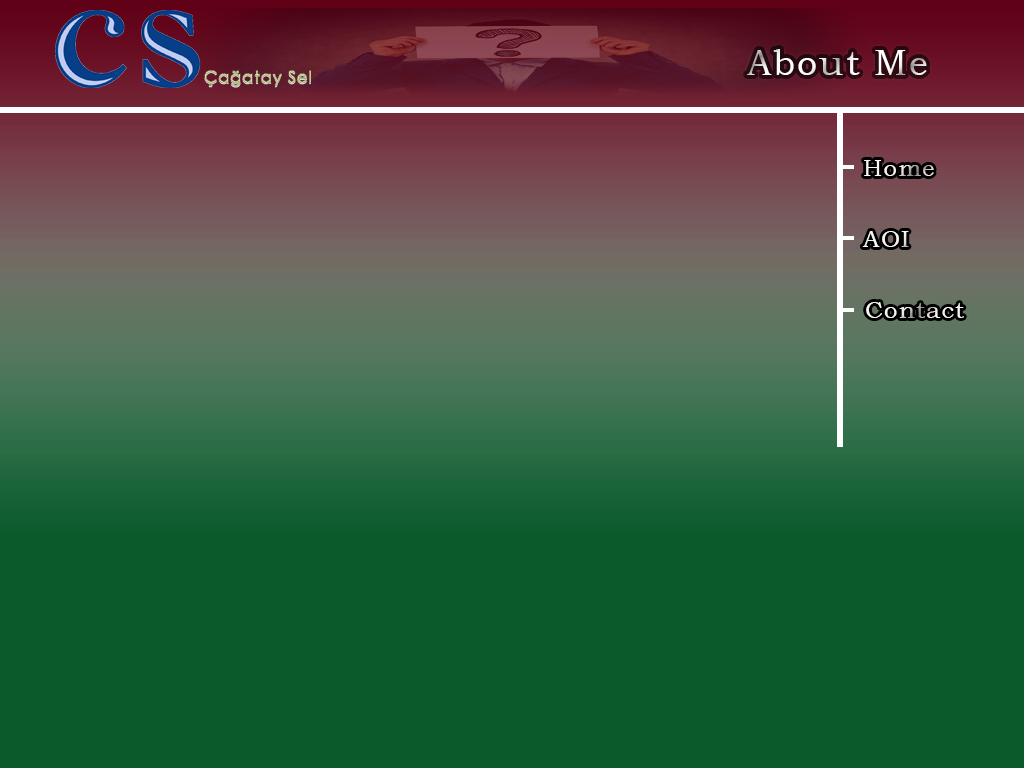
<style>
.page{position:relative;width:1024px;height:768px;background:#0a5a2c}
.page>*{position:absolute;margin:0}
.t1{font:36px "BookmanOldStyle";letter-spacing:0.05em;color:#ffffff}
.t2{font:24px "BookmanOldStyle";letter-spacing:0.05em}
.t3{font:24px "BookmanOldStyle";letter-spacing:0.05em;color:#f9f6f2}
.t4{font:24px "BookmanOldStyle";letter-spacing:0.05em;color:#f6f2ef}
</style>
<div class="page">
<p class="t1" style="left:747px;top:49px;width:180px;height:26px">About Me</p>
<p class="t2" style="left:864px;top:160px;width:70px;height:16px">Home</p>
<p class="t3" style="left:862px;top:231px;width:47px;height:16px">AOI</p>
<p class="t4" style="left:866px;top:302px;width:98px;height:16px">Contact</p>
</div>
